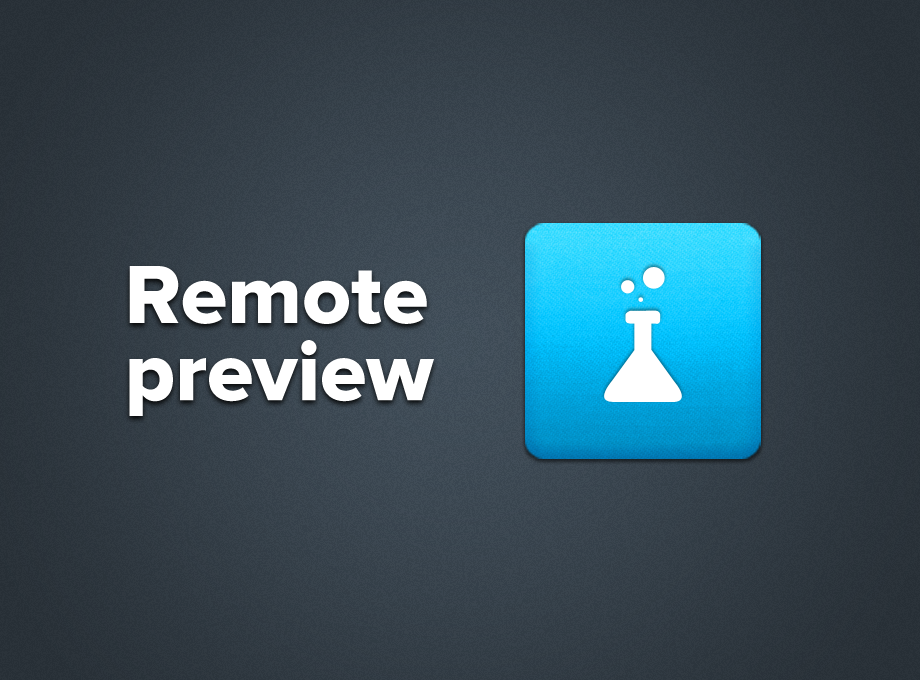
<style>
.page{position:relative;width:920px;height:680px}
.page>*{position:absolute;margin:0}
.t1{font:85.5px/77.3px "ProximaNova-Extrabld";color:#ffffff}
</style>
<div class="page">
<p class="t1" style="left:129px;top:266px;width:305px;height:150px">Remote<br>preview</p>
</div>
